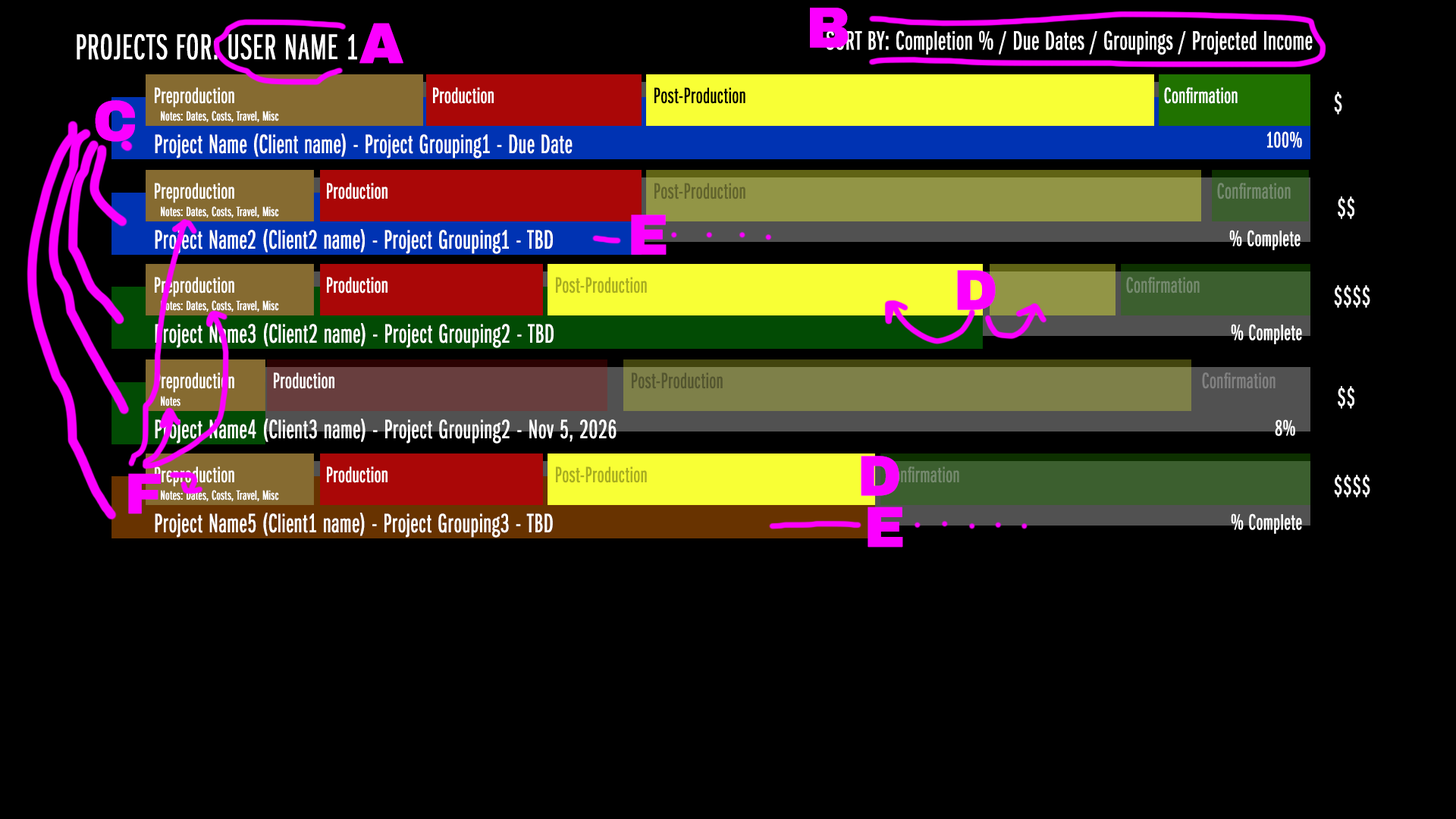
<style>
.page{position:relative;width:1456px;height:819px;background:#000000}
.page>*{position:absolute;margin:0}
.t1{font:56.9px "ArchivoBlack-Regular";color:#fb00ff;font-weight:bold}
.t2{font:36.8px "FranklinGothicURWExtComD-Boo";color:#ffffff;font-weight:bold}
.t3{font:27.3px "FranklinGothicURWExtComD-Boo";color:#ffffff;font-weight:bold}
.t4{font:22.7px "FranklinGothicURWExtComD-Boo";color:#ffffff;font-weight:bold}
.t5{font:22.7px "FranklinGothicURWExtComD-Boo";color:#000000;font-weight:bold}
.t6{font:13.6px "FranklinGothicURWExtComD-Boo";color:#ffffff;font-weight:bold}
.t7{font:22.7px "FranklinGothicURWExtComD-Boo";color:#61632c;font-weight:bold}
.t8{font:22.7px "FranklinGothicURWExtComD-Boo";color:#758a6e;font-weight:bold}
.t9{font:22.7px "FranklinGothicURWExtComD-Boo";color:#a8ad21;font-weight:bold}
.t10{font:22.7px "FranklinGothicURWExtComD-Boo";color:#53552f;font-weight:bold}
.t11{font:22.7px "FranklinGothicURWExtComD-Boo";color:#818181;font-weight:bold}
</style>
<div class="page">
<p class="t1" style="left:810px;top:8px;width:39px;height:40px">B</p>
<p class="t1" style="left:359px;top:23px;width:44px;height:41px">A</p>
<p class="t2" style="left:77px;top:33px;width:280px;height:27px">PROJECTS FOR: USER NAME 1</p>
<p class="t3" style="left:826px;top:30px;width:487px;height:25px">SORT BY: Completion % / Due Dates / Groupings / Projected Income</p>
<p class="t4" style="left:155px;top:87px;width:79px;height:21px">Preproduction</p>
<p class="t4" style="left:433px;top:87px;width:61px;height:17px">Production</p>
<p class="t5" style="left:654px;top:87px;width:91px;height:17px">Post-Production</p>
<p class="t4" style="left:1164px;top:87px;width:74px;height:17px">Confirmation</p>
<p class="t1" style="left:95px;top:100px;width:40px;height:42px">C</p>
<p class="t3" style="left:1334px;top:92px;width:8px;height:23px">$</p>
<p class="t6" style="left:161px;top:111px;width:118px;height:11px">Notes: Dates, Costs, Travel, Misc</p>
<p class="t3" style="left:155px;top:133px;width:418px;height:25px">Project Name (Client name) - Project Grouping1 - Due Date</p>
<p class="t4" style="left:1267px;top:131px;width:35px;height:17px">100%</p>
<p class="t4" style="left:155px;top:183px;width:79px;height:20px">Preproduction</p>
<p class="t4" style="left:327px;top:183px;width:61px;height:16px">Production</p>
<p class="t7" style="left:654px;top:183px;width:91px;height:16px">Post-Production</p>
<p class="t8" style="left:1217px;top:183px;width:74px;height:16px">Confirmation</p>
<p class="t3" style="left:1338px;top:196px;width:16px;height:23px">$$</p>
<p class="t6" style="left:161px;top:206px;width:118px;height:12px">Notes: Dates, Costs, Travel, Misc</p>
<p class="t1" style="left:631px;top:215px;width:36px;height:40px">E</p>
<p class="t3" style="left:155px;top:229px;width:398px;height:25px">Project Name2 (Client2 name) - Project Grouping1 - TBD</p>
<p class="t4" style="left:1229px;top:230px;width:72px;height:20px">% Complete</p>
<p class="t1" style="left:957px;top:270px;width:39px;height:40px">D</p>
<p class="t4" style="left:155px;top:277px;width:79px;height:20px">Preproduction</p>
<p class="t4" style="left:327px;top:277px;width:61px;height:16px">Production</p>
<p class="t9" style="left:556px;top:277px;width:91px;height:16px">Post-Production</p>
<p class="t8" style="left:1126px;top:277px;width:74px;height:16px">Confirmation</p>
<p class="t3" style="left:1334px;top:285px;width:36px;height:23px">$$$$</p>
<p class="t6" style="left:161px;top:300px;width:118px;height:12px">Notes: Dates, Costs, Travel, Misc</p>
<p class="t3" style="left:155px;top:323px;width:399px;height:25px">Project Name3 (Client2 name) - Project Grouping2 - TBD</p>
<p class="t4" style="left:1231px;top:324px;width:71px;height:20px">% Complete</p>
<p class="t4" style="left:155px;top:372px;width:79px;height:21px">Preproduction</p>
<p class="t4" style="left:274px;top:372px;width:60px;height:17px">Production</p>
<p class="t10" style="left:632px;top:372px;width:91px;height:17px">Post-Production</p>
<p class="t11" style="left:1202px;top:372px;width:73px;height:17px">Confirmation</p>
<p class="t3" style="left:1338px;top:386px;width:16px;height:23px">$$</p>
<p class="t6" style="left:161px;top:396px;width:19px;height:10px">Notes</p>
<p class="t3" style="left:155px;top:419px;width:462px;height:25px">Project Name4 (Client3 name) - Project Grouping2 - Nov 5, 2026</p>
<p class="t4" style="left:1275px;top:419px;width:20px;height:17px">8%</p>
<p class="t1" style="left:861px;top:456px;width:38px;height:40px">D</p>
<p class="t1" style="left:128px;top:473px;width:33px;height:41px">F</p>
<p class="t4" style="left:155px;top:466px;width:79px;height:21px">Preproduction</p>
<p class="t4" style="left:327px;top:466px;width:61px;height:17px">Production</p>
<p class="t9" style="left:556px;top:466px;width:91px;height:17px">Post-Production</p>
<p class="t3" style="left:1334px;top:475px;width:36px;height:22px">$$$$</p>
<p class="t6" style="left:161px;top:490px;width:118px;height:11px">Notes: Dates, Costs, Travel, Misc</p>
<p class="t1" style="left:868px;top:507px;width:35px;height:41px">E</p>
<p class="t3" style="left:155px;top:513px;width:398px;height:25px">Project Name5 (Client1 name) - Project Grouping3 - TBD</p>
<p class="t4" style="left:1231px;top:513px;width:71px;height:21px">% Complete</p>
</div>
